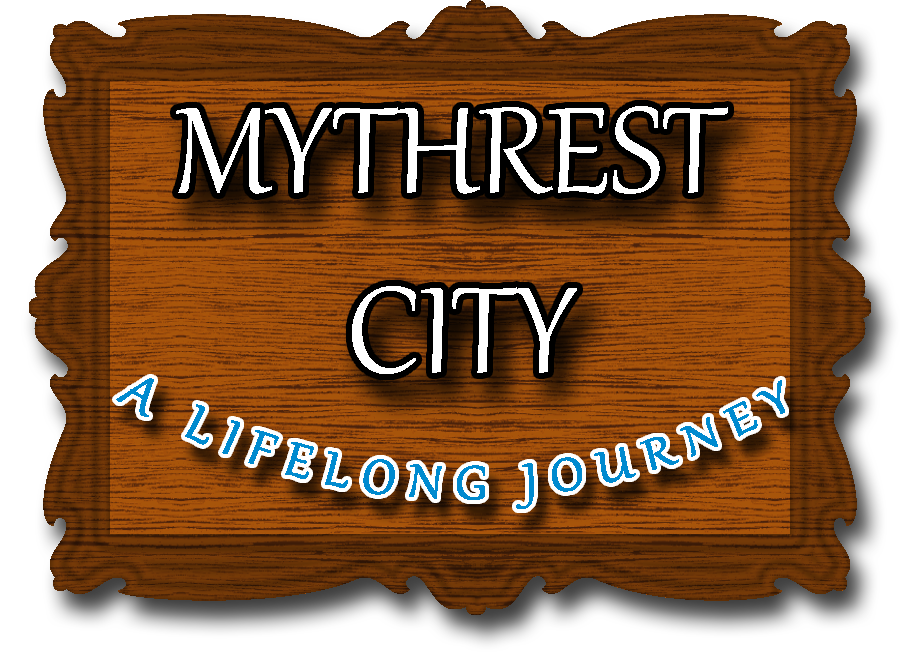
<style>
.page{position:relative;width:900px;height:657px}
.page>*{position:absolute;margin:0}
.t1{font:150px "Gabriola";color:#ffffff}
.t2{font:58.3px "Gabriola";letter-spacing:0.2em;color:#008acf}
</style>
<div class="page">
<p class="t1" style="left:176px;top:106px;width:552px;height:268px;text-align:center">MYTHREST <br>CITY</p>
<p class="t2" style="left:116px;top:378px;width:669px;height:131px;text-align:center">A LIFELONG JOURNEY</p>
</div>
